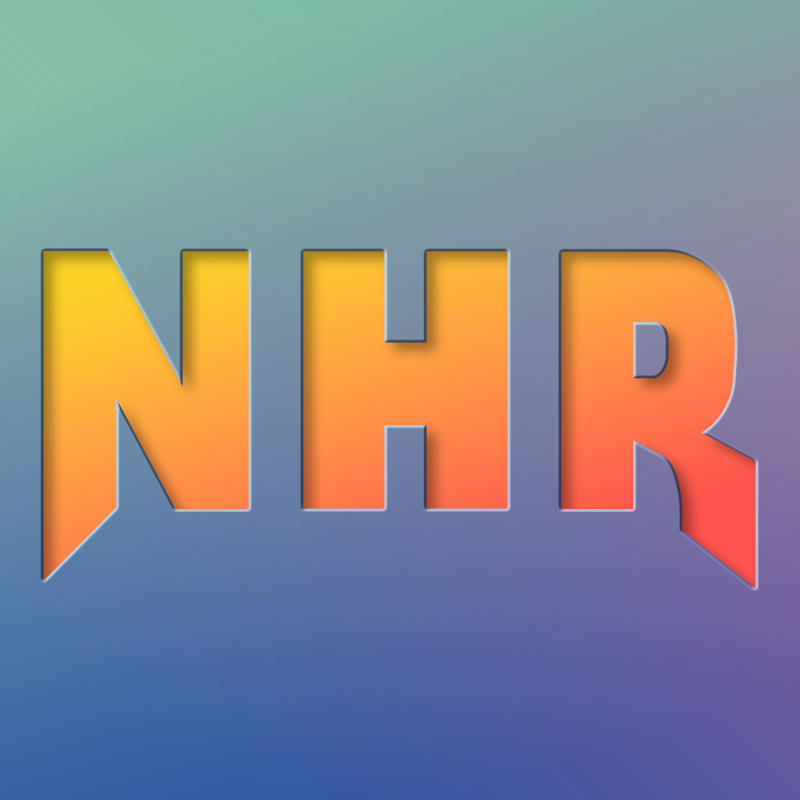
<style>
.page{position:relative;width:800px;height:800px}
.page>*{position:absolute;margin:0}
.t1{font:368.3px "Arwing";letter-spacing:0.1em}
</style>
<div class="page">
<p class="t1" style="left:43px;top:251px;width:713px;height:338px">NHR</p>
</div>
